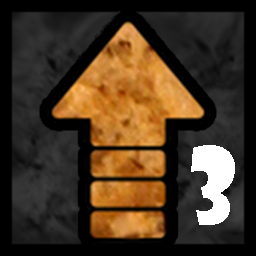
<style>
.page{position:relative;width:256px;height:256px;background:#000000}
.page>*{position:absolute;margin:0}
.t1{font:100px "ShowcardGothic-Reg";color:#ffffff}
</style>
<div class="page">
<p class="t1" style="left:191px;top:145px;width:44px;height:80px">3</p>
</div>
